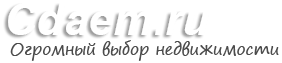
<style>
.page{position:relative;width:282px;height:63px;background:#ffffff}
.page>*{position:absolute;margin:0}
.t1{font:16.7px "SegoePrint";color:#4c4c4c;scale:0.95 1}
</style>
<div class="page">
<p class="t1" style="left:10px;top:40px;width:269px;height:21px">Огромный выбор недвижимости</p>
</div>
